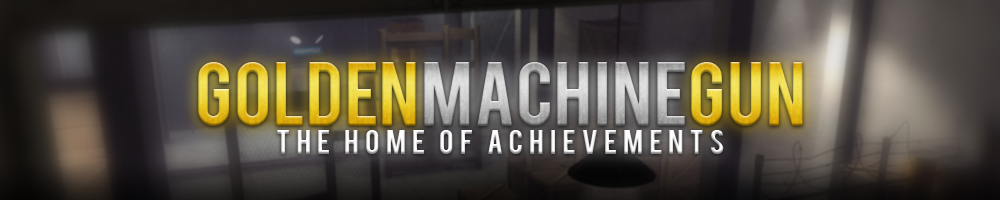
<style>
.page{position:relative;width:1000px;height:200px}
.page>*{position:absolute;margin:0}
.t1{font:72px "Bebas"}
.t2{font:27.4px "Bebas";letter-spacing:0.2em;color:#ffffff}
</style>
<div class="page">
<p class="t1" style="left:198px;top:62px;width:605px;height:64px">GoldenMachineGun</p>
<p class="t2" style="left:277px;top:130px;width:447px;height:24px">the home of achievements</p>
</div>
